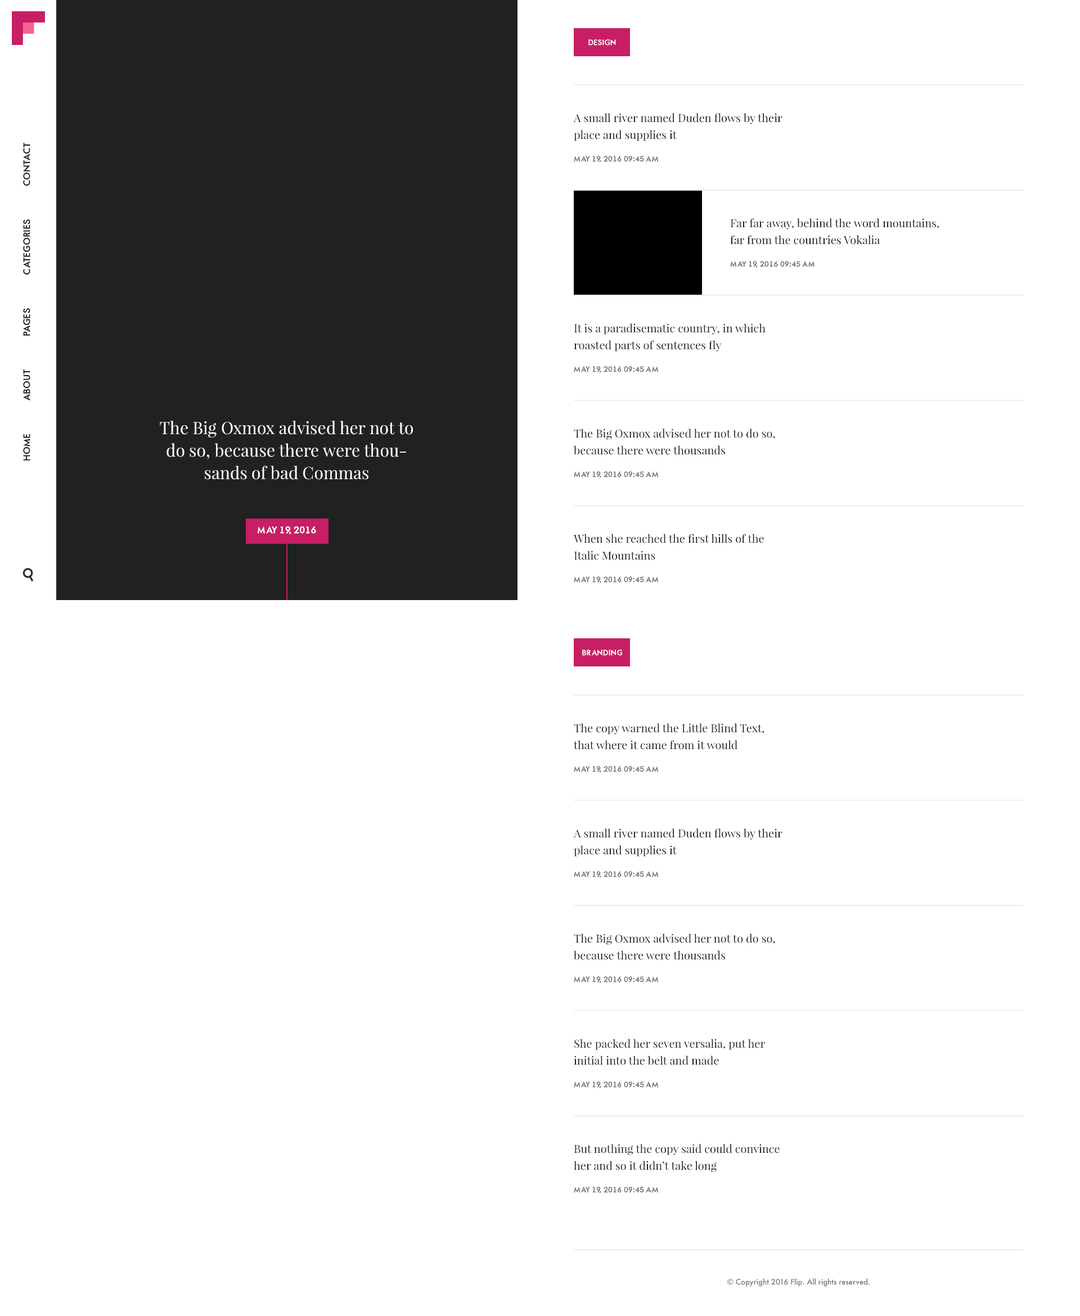
<style>
.page{position:relative;width:1080px;height:1316px;background:#ffffff}
.page>*{position:absolute;margin:0}
.t1{font:7.3px "AFuturaOrtoBold";color:#ffffff;text-transform:uppercase}
.t2{font:11.2px/16.9px "PlayfairDisplay-Regular";color:#212121}
.t3{font:9px "AFuturaOrtoBold";color:#212121;text-transform:uppercase}
.t4{font:7.3px "AFuturaOrtoBold";color:#727272;text-transform:uppercase}
.t5{font:16.9px/22.5px "PlayfairDisplay-Regular";color:#ffffff}
.t6{font:9px "AFuturaOrtoBold";color:#ffffff;text-transform:uppercase}
.t7{font:7.4px "Futura-Medium";color:#727272}
</style>
<div class="page">
<p class="t1" style="left:588px;top:39px;width:28px;height:7px">design</p>
<p class="t2" style="left:573px;top:113px;width:209px;height:28px">A small river named Duden flows by their place and supplies it</p>
<p class="t3" style="left:23px;top:143px;width:7px;height:43px;rotate:-90deg">Contact</p>
<p class="t4" style="left:574px;top:156px;width:84px;height:7px">may 19, 2016 09:45 AM</p>
<p class="t3" style="left:23px;top:219px;width:7px;height:56px;rotate:-90deg">categories</p>
<p class="t2" style="left:730px;top:218px;width:209px;height:27px">Far far away, behind the word mountains, far from the countries Vokalia</p>
<p class="t4" style="left:730px;top:261px;width:84px;height:7px">may 19, 2016 09:45 AM</p>
<p class="t3" style="left:23px;top:308px;width:7px;height:28px;rotate:-90deg">pages</p>
<p class="t2" style="left:574px;top:323px;width:192px;height:29px">It is a paradisematic country, in which roasted parts of sentences fly</p>
<p class="t3" style="left:23px;top:370px;width:7px;height:31px;rotate:-90deg">about</p>
<p class="t4" style="left:574px;top:366px;width:84px;height:7px">may 19, 2016 09:45 AM</p>
<p class="t5" style="left:160px;top:421px;width:253px;height:59px;text-align:center">The Big Oxmox advised her not to do so, because there were thousands of bad Commas</p>
<p class="t3" style="left:23px;top:434px;width:7px;height:27px;rotate:-90deg">Home</p>
<p class="t2" style="left:574px;top:429px;width:201px;height:26px">The Big Oxmox advised her not to do so, because there were thousands</p>
<p class="t4" style="left:574px;top:471px;width:84px;height:7px">may 19, 2016 09:45 AM</p>
<p class="t6" style="left:257px;top:526px;width:59px;height:8px">may 19, 2016</p>
<p class="t2" style="left:573px;top:534px;width:191px;height:26px">When she reached the first hills of the Italic Mountains</p>
<p class="t4" style="left:574px;top:577px;width:84px;height:6px">may 19, 2016 09:45 AM</p>
<p class="t1" style="left:582px;top:650px;width:40px;height:6px">branding</p>
<p class="t2" style="left:574px;top:723px;width:190px;height:27px">The copy warned the Little Blind Text, that where it came from it would</p>
<p class="t4" style="left:574px;top:766px;width:84px;height:7px">may 19, 2016 09:45 AM</p>
<p class="t2" style="left:573px;top:829px;width:209px;height:28px">A small river named Duden flows by their place and supplies it</p>
<p class="t4" style="left:574px;top:871px;width:84px;height:7px">may 19, 2016 09:45 AM</p>
<p class="t2" style="left:574px;top:934px;width:201px;height:26px">The Big Oxmox advised her not to do so, because there were thousands</p>
<p class="t4" style="left:574px;top:976px;width:84px;height:7px">may 19, 2016 09:45 AM</p>
<p class="t2" style="left:574px;top:1039px;width:191px;height:26px">She packed her seven versalia, put her initial into the belt and made</p>
<p class="t4" style="left:574px;top:1082px;width:84px;height:6px">may 19, 2016 09:45 AM</p>
<p class="t2" style="left:574px;top:1144px;width:206px;height:28px">But nothing the copy said could convince her and so it didn’t take long</p>
<p class="t4" style="left:574px;top:1187px;width:84px;height:7px">may 19, 2016 09:45 AM</p>
<p class="t7" style="left:727px;top:1279px;width:143px;height:8px">© Copyright 2016 Flip. All rights reserved.</p>
</div>
